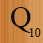
<style>
.page{position:relative;width:43px;height:43px}
.page>*{position:absolute;margin:0}
.t1{font:30px "TimesNewRomanPSMT";color:#0c0c0b}
.t2{font:12px "TimesNewRomanPSMT";color:#0c0c0b}
</style>
<div class="page">
<p class="t1" style="left:11px;top:7px;width:20px;height:26px">Q</p>
<p class="t2" style="left:30px;top:28px;width:11px;height:9px">10</p>
</div>
